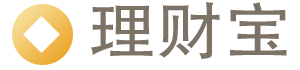
<style>
.page{position:relative;width:300px;height:70px;background:#ffffff}
.page>*{position:absolute;margin:0}
.t1{font:62.2px "AdobeHeitiStd-Regular";color:#7c7366;scale:1.09 1}
</style>
<div class="page">
<p class="t1" style="left:91px;top:2px;width:196px;height:57px">理财宝</p>
</div>
